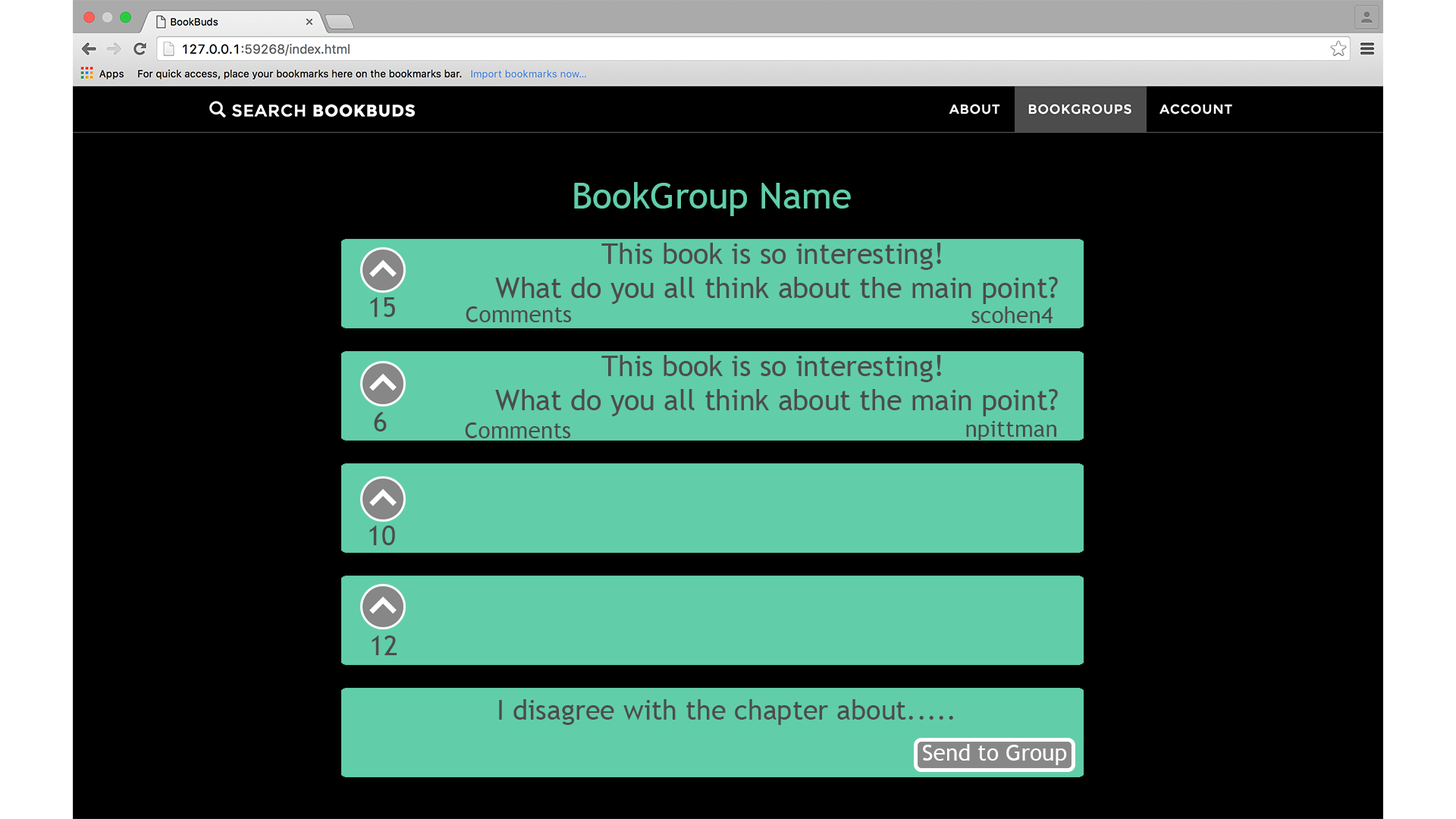
<style>
.page{position:relative;width:1456px;height:819px;background:#000000}
.page>*{position:absolute;margin:0}
.t1{font:36.4px "TrebuchetMS";color:#61cea9}
.t2{font:28.5px "TrebuchetMS";color:#4c4c4c}
.t3{font:27.3px "TrebuchetMS";color:#4c4c4c}
.t4{font:22.7px "TrebuchetMS";color:#4c4c4c}
.t5{font:22.7px "TrebuchetMS";color:#ffffff}
</style>
<div class="page">
<p class="t1" style="left:574px;top:182px;width:277px;height:34px">BookGroup Name</p>
<p class="t2" style="left:495px;top:243px;width:563px;height:61px;text-align:center">This book is so interesting! <br>What do you all think about the main point?</p>
<p class="t3" style="left:370px;top:297px;width:25px;height:20px">15</p>
<p class="t4" style="left:466px;top:306px;width:106px;height:16px">Comments</p>
<p class="t4" style="left:971px;top:306px;width:82px;height:17px">scohen4</p>
<p class="t2" style="left:495px;top:355px;width:563px;height:61px;text-align:center">This book is so interesting! <br>What do you all think about the main point?</p>
<p class="t3" style="left:374px;top:412px;width:13px;height:19px">6</p>
<p class="t4" style="left:465px;top:422px;width:106px;height:16px">Comments</p>
<p class="t4" style="left:966px;top:421px;width:90px;height:20px">npittman</p>
<p class="t3" style="left:369px;top:526px;width:26px;height:19px">10</p>
<p class="t3" style="left:372px;top:635px;width:25px;height:20px">12</p>
<p class="t3" style="left:499px;top:699px;width:454px;height:26px">I disagree with the chapter about.....</p>
<p class="t5" style="left:923px;top:744px;width:144px;height:21px">Send to Group</p>
</div>
